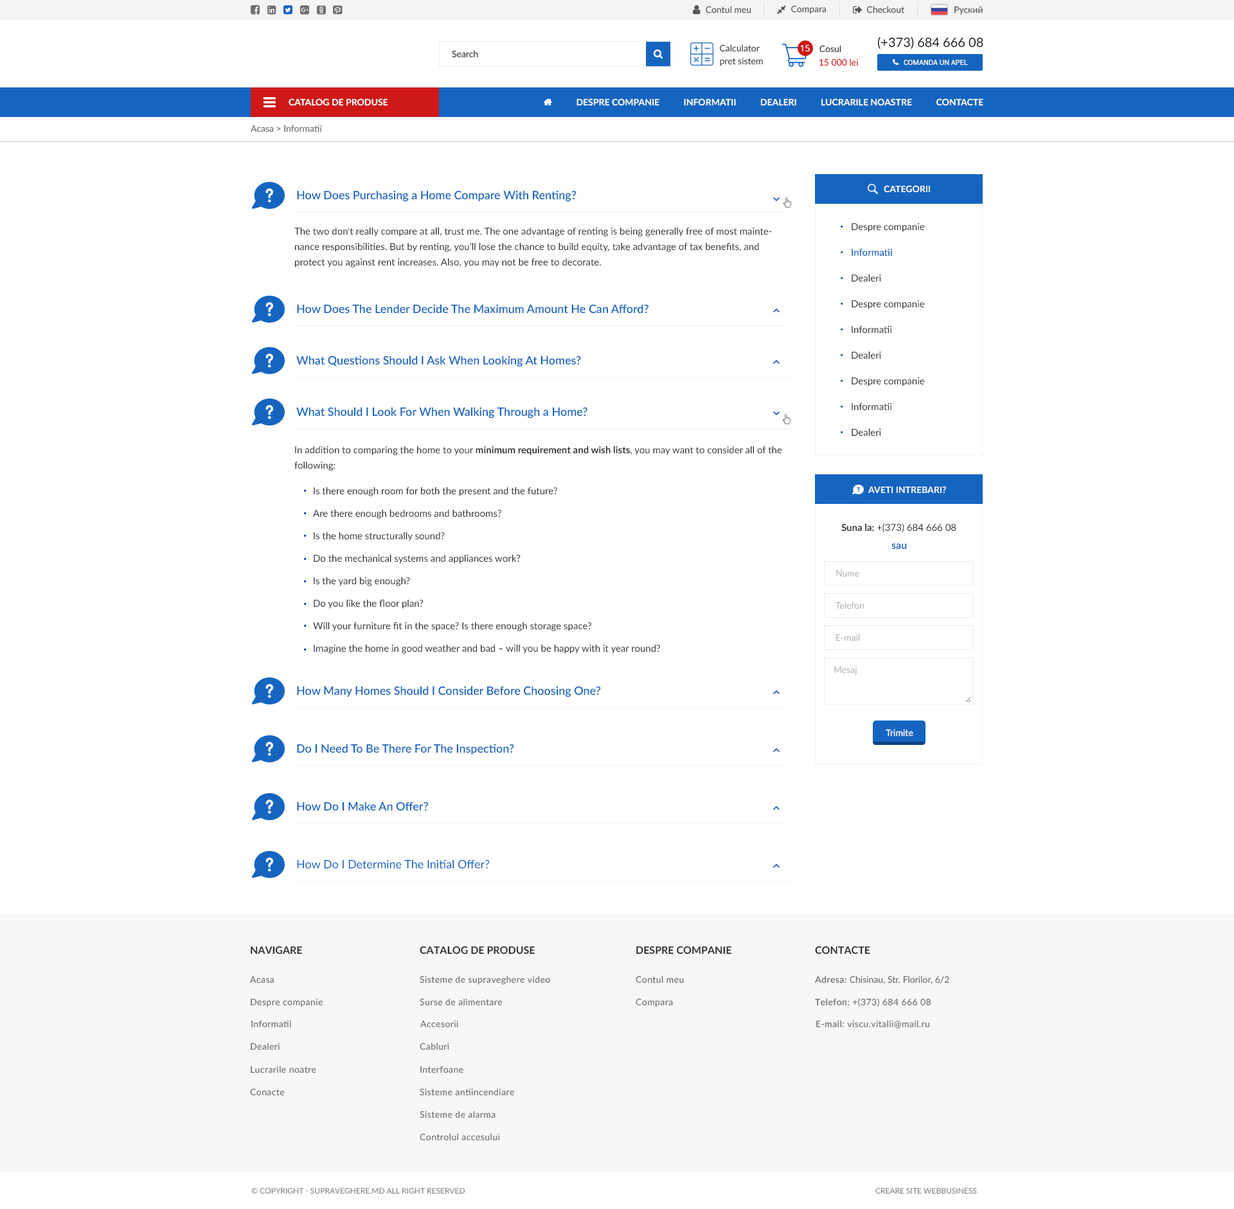
<style>
.page{position:relative;width:1234px;height:1209px;background:#ffffff}
.page>*{position:absolute;margin:0}
.t1{font:9px "Lato-Regular";color:#53555a}
.t2{font:12.9px "Lato-Regular";color:#1a1a1a}
.t3{font:9px "Lato-Regular";color:#2f3034}
.t4{font:9px/12.9px "Lato-Regular";color:#444444}
.t5{font:9px "OpenSans";color:#ffffff}
.t6{font:9px "Lato-Semibold";color:#444444}
.t7{font:9px "Lato-Regular";color:#cf1818}
.t8{font:9px "Lato-Bold";color:#ffffff;text-transform:uppercase}
.t9{font:9px "Lato-Regular";color:#6f6f6f}
.t10{font:11.6px "Lato-Semibold";color:#1565c0}
.t11{font:9.6px/15.4px "Lato-Regular";color:#2d2d2d}
.t12{font:16.1px "Lato-Regular";color:#0750b5}
.t13{font:9.6px/25.7px "Lato-Regular";color:#2d2d2d}
.t14{font:9.6px/25.7px "Lato-Semibold";color:#1565c0}
.t15{font:9.6px/15.4px "Lato-Bold";color:#2d2d2d}
.t16{font:16.1px "Lato-Regular";color:#003399}
.t17{font:9.6px/22.5px "Lato-Regular";color:#2d2d2d}
.t18{font:9.6px "Lato-Regular";color:#2d2d2d}
.t19{font:9.6px "Lato-Bold";color:#2d2d2d}
.t20{font:10.3px "Lato-Bold";color:#1565c0}
.t21{font:9px "Lato-Regular";color:#afafaf}
.t22{font:9px "Lato-Medium";color:#ffffff}
.t23{font:11.6px "Lato-Regular";color:#1565c0}
.t24{font:10.3px "Lato-Bold";color:#2f3034;text-transform:uppercase}
.t25{font:9px "Lato-Regular";letter-spacing:0.03em;color:#6f6f6f}
.t26{font:9px "Lato-Semibold";letter-spacing:0.03em;color:#6f6f6f}
.t27{font:7.7px "Lato-Regular";color:#888888;text-transform:uppercase}
</style>
<div class="page">
<p class="t1" style="left:706px;top:6px;width:46px;height:8px">Contul meu</p>
<p class="t1" style="left:791px;top:5px;width:36px;height:9px">Compara</p>
<p class="t1" style="left:867px;top:6px;width:38px;height:8px">Checkout</p>
<p class="t1" style="left:955px;top:6px;width:28px;height:9px">Руский</p>
<p class="t2" style="left:878px;top:37px;width:106px;height:12px">(+373) 684 666 08</p>
<p class="t3" style="left:452px;top:50px;width:26px;height:8px">Search</p>
<p class="t4" style="left:720px;top:44px;width:43px;height:22px">Calculator<br>pret sistem</p>
<p class="t5" style="left:800px;top:45px;width:10px;height:6px">15</p>
<p class="t6" style="left:820px;top:45px;width:22px;height:8px">Cosul</p>
<p class="t7" style="left:819px;top:59px;width:39px;height:7px">15 000 lei</p>
<p class="t8" style="left:289px;top:98px;width:99px;height:8px">catalog de produse</p>
<p class="t9" style="left:251px;top:125px;width:71px;height:7px">Acasa &gt; Informatii</p>
<p class="t8" style="left:884px;top:185px;width:46px;height:7px">categorii</p>
<p class="t10" style="left:297px;top:190px;width:280px;height:12px">How Does Purchasing a Home Compare With Renting?</p>
<p class="t11" style="left:294px;top:228px;width:478px;height:39px">The two don't really compare at all, trust me. The one advantage of renting is being generally free of most maintenance responsibilities. But by renting, you’ll lose the chance to build equity, take advantage of tax benefits, and protect you against rent increases. Also, you may not be free to decorate.</p>
<p class="t12" style="left:841px;top:226px;width:2px;height:2px">.</p>
<p class="t13" style="left:852px;top:223px;width:72px;height:213px">Despre companie<br><span class="t14">Informatii<br></span>Dealeri<br>Despre companie<br>Informatii<br>Dealeri<br>Despre companie<br>Informatii<br>Dealeri</p>
<p class="t12" style="left:841px;top:251px;width:2px;height:2px">.</p>
<p class="t12" style="left:841px;top:277px;width:2px;height:2px">.</p>
<p class="t10" style="left:297px;top:304px;width:352px;height:10px">How Does The Lender Decide The Maximum Amount He Can Afford?</p>
<p class="t12" style="left:841px;top:303px;width:2px;height:2px">.</p>
<p class="t12" style="left:841px;top:328px;width:2px;height:2px">.</p>
<p class="t10" style="left:296px;top:356px;width:285px;height:11px">What Questions Should I Ask When Looking At Homes?</p>
<p class="t12" style="left:841px;top:354px;width:2px;height:2px">.</p>
<p class="t12" style="left:841px;top:380px;width:2px;height:2px">.</p>
<p class="t10" style="left:296px;top:407px;width:292px;height:12px">What Should I Look For When Walking Through a Home?</p>
<p class="t12" style="left:841px;top:406px;width:2px;height:2px">.</p>
<p class="t12" style="left:841px;top:431px;width:2px;height:2px">.</p>
<p class="t11" style="left:294px;top:446px;width:488px;height:25px">In addition to comparing the home to your <span class="t15">minimum requirement and wish lists</span>, you may want to consider all of the <br>following:</p>
<p class="t16" style="left:304px;top:490px;width:3px;height:2px">.</p>
<p class="t17" style="left:313px;top:487px;width:347px;height:167px">Is there enough room for both the present and the future?<br>Are there enough bedrooms and bathrooms?<br>Is the home structurally sound?<br>Do the mechanical systems and appliances work?<br>Is the yard big enough?<br>Do you like the floor plan?<br>Will your furniture fit in the space? Is there enough storage space?<br>Imagine the home in good weather and bad – will you be happy with it year round?</p>
<p class="t8" style="left:869px;top:486px;width:77px;height:7px">aveti intrebari?</p>
<p class="t16" style="left:304px;top:512px;width:3px;height:2px">.</p>
<p class="t18" style="left:842px;top:523px;width:115px;height:9px"><span class="t19">Suna la: </span>+(373) 684 666 08</p>
<p class="t16" style="left:304px;top:535px;width:3px;height:2px">.</p>
<p class="t20" style="left:892px;top:543px;width:15px;height:7px">sau</p>
<p class="t16" style="left:304px;top:558px;width:3px;height:2px">.</p>
<p class="t16" style="left:304px;top:580px;width:3px;height:2px">.</p>
<p class="t21" style="left:836px;top:570px;width:24px;height:7px">Nume</p>
<p class="t16" style="left:304px;top:603px;width:3px;height:2px">.</p>
<p class="t21" style="left:836px;top:602px;width:29px;height:7px">Telefon</p>
<p class="t16" style="left:304px;top:625px;width:3px;height:2px">.</p>
<p class="t21" style="left:836px;top:634px;width:24px;height:7px">E-mail</p>
<p class="t16" style="left:304px;top:649px;width:3px;height:2px">.</p>
<p class="t21" style="left:834px;top:666px;width:23px;height:9px">Mesaj</p>
<p class="t10" style="left:297px;top:686px;width:304px;height:12px">How Many Homes Should I Consider Before Choosing One?</p>
<p class="t22" style="left:886px;top:729px;width:28px;height:8px">Trimite</p>
<p class="t10" style="left:297px;top:744px;width:217px;height:11px">Do I Need To Be There For The Inspection?</p>
<p class="t10" style="left:297px;top:802px;width:131px;height:9px">How Do I Make An Offer?</p>
<p class="t23" style="left:297px;top:860px;width:193px;height:9px">How Do I Determine The Initial Offer?</p>
<p class="t24" style="left:251px;top:946px;width:51px;height:9px">navigare</p>
<p class="t24" style="left:420px;top:946px;width:115px;height:9px">Catalog de produse</p>
<p class="t24" style="left:636px;top:946px;width:96px;height:9px">Despre companie</p>
<p class="t24" style="left:815px;top:946px;width:55px;height:9px">Contacte</p>
<p class="t25" style="left:250px;top:976px;width:24px;height:8px">Acasa</p>
<p class="t25" style="left:420px;top:976px;width:130px;height:9px">Sisteme de supraveghere video</p>
<p class="t25" style="left:636px;top:976px;width:48px;height:8px">Contul meu</p>
<p class="t9" style="left:815px;top:976px;width:135px;height:8px"><span class="t26">Adresa: </span>Chisinau, Str. Florilor, 6/2</p>
<p class="t25" style="left:251px;top:998px;width:72px;height:9px">Despre companie</p>
<p class="t25" style="left:420px;top:998px;width:83px;height:8px">Surse de alimentare</p>
<p class="t25" style="left:636px;top:998px;width:37px;height:9px">Compara</p>
<p class="t25" style="left:815px;top:998px;width:117px;height:9px"><span class="t26">Telefon:</span> +(373) 684 666 08</p>
<p class="t25" style="left:251px;top:1020px;width:40px;height:8px">Informatii</p>
<p class="t25" style="left:420px;top:1020px;width:38px;height:8px">Accesorii</p>
<p class="t25" style="left:816px;top:1020px;width:114px;height:9px"><span class="t26">E-mail:</span> viscu.vitalii@mail.ru</p>
<p class="t25" style="left:251px;top:1043px;width:29px;height:7px">Dealeri</p>
<p class="t25" style="left:420px;top:1043px;width:29px;height:7px">Cabluri</p>
<p class="t25" style="left:251px;top:1066px;width:65px;height:8px">Lucrarile noatre</p>
<p class="t25" style="left:420px;top:1066px;width:44px;height:8px">Interfoane</p>
<p class="t25" style="left:250px;top:1088px;width:35px;height:8px">Conacte</p>
<p class="t25" style="left:420px;top:1088px;width:94px;height:8px">Sisteme antiincendiare</p>
<p class="t25" style="left:420px;top:1111px;width:76px;height:8px">Sisteme de alarma</p>
<p class="t25" style="left:420px;top:1133px;width:80px;height:8px">Controlul accesului</p>
<p class="t27" style="left:251px;top:1188px;width:214px;height:6px">© Copyright - supraveghere.md all right reserved</p>
<p class="t27" style="left:876px;top:1188px;width:101px;height:6px">Creare site WebBusiness</p>
</div>
